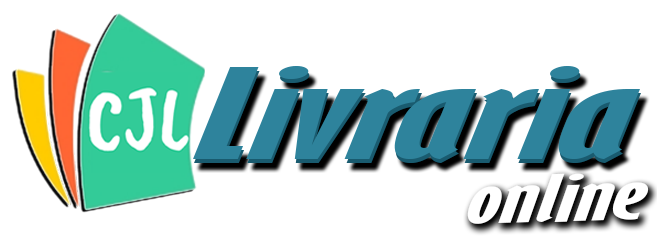
<style>
.page{position:relative;width:657px;height:250px;background:#ffffff}
.page>*{position:absolute;margin:0}
.t1{font:114.7px "GillSansMT-ExtraCondensedBold";color:#2e839c;font-style:italic;scale:2.29 1}
.t2{font:59.4px "GillSansMT-ExtraCondensedBold";color:#ffffff;font-style:italic;scale:2.19 1}
</style>
<div class="page">
<p class="t1" style="left:193px;top:66px;width:447px;height:93px">Livraria</p>
<p class="t1" style="left:194px;top:70px;width:447px;height:93px">Livraria</p>
<p class="t2" style="left:467px;top:173px;width:182px;height:51px;rotate:-2deg">online</p>
</div>
